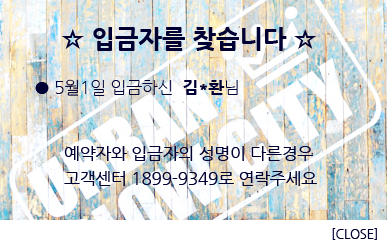
<style>
.page{position:relative;width:387px;height:240px}
.page>*{position:absolute;margin:0}
.t1{font:25px "NanumGothicExtraBold";color:#000033}
.t2{font:16.7px "NanumGothicLight";color:#000033}
.t3{font:16.7px "NanumGothicExtraBold";color:#000033}
.t4{font:16.7px/25px "NanumGothic";color:#000033}
.t5{font:12.5px "NanumGothic";color:#000033}
</style>
<div class="page">
<p class="t1" style="left:61px;top:27px;width:256px;height:24px">☆ 입금자를 찾습니다 ☆</p>
<p class="t2" style="left:35px;top:79px;width:203px;height:17px">● 5월1일 입금하신  <span class="t3">김*환</span>님</p>
<p class="t4" style="left:64px;top:146px;width:253px;height:40px">예약자와 입금자의 성명이 다른경우<br>고객센터 1899-9349로 연락주세요</p>
<p class="t5" style="left:332px;top:228px;width:45px;height:12px">[CLOSE]</p>
</div>
